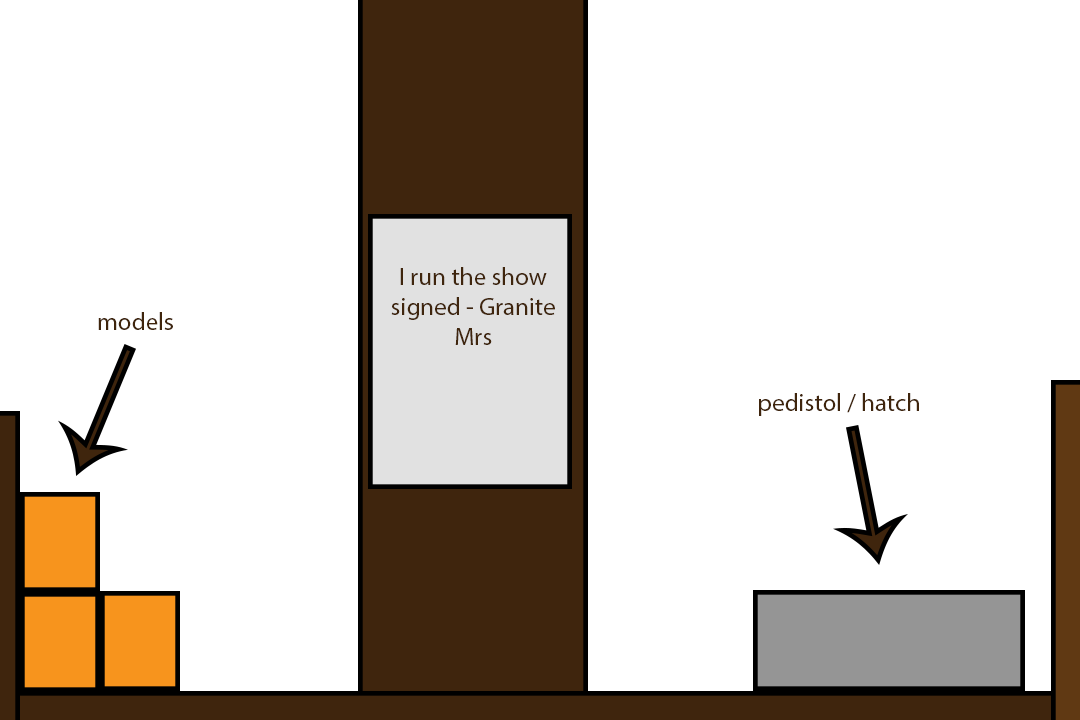
<style>
.page{position:relative;width:1080px;height:720px;background:#ffffff}
.page>*{position:absolute;margin:0}
.t1{font:25px "MyriadPro-Regular";color:#3f250d}
</style>
<div class="page">
<p class="t1" style="left:391px;top:267px;width:164px;height:78px;text-align:center">I run the show signed - Granite Mrs</p>
<p class="t1" style="left:98px;top:312px;width:75px;height:18px">models</p>
<p class="t1" style="left:759px;top:393px;width:160px;height:23px">pedistol / hatch</p>
</div>
